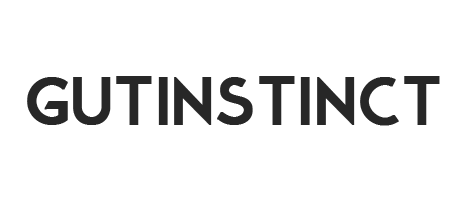
<style>
.page{position:relative;width:465px;height:201px;background:#ffffff}
.page>*{position:absolute;margin:0}
.t1{font:63.6px "ModernSans";color:#272727;font-weight:bold}
</style>
<div class="page">
<p class="t1" style="left:27px;top:76px;width:413px;height:50px">GUTINSTINCT</p>
</div>
